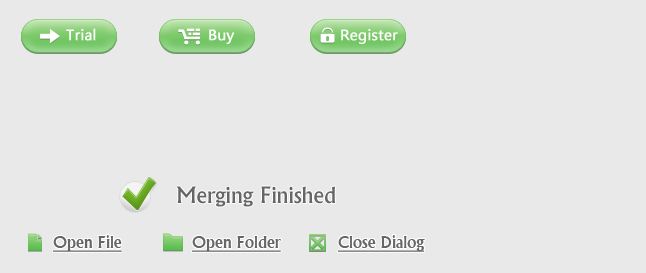
<style>
.page{position:relative;width:646px;height:273px;background:#e9e9e9}
.page>*{position:absolute;margin:0}
.t1{font:14px "MicrosoftYaHei";color:#ffffff;font-weight:bold}
.t2{font:24px "Narkisim";color:#666666}
.t3{font:18px "Narkisim";color:#666666}
.t4{font:18px "Narkisim";color:#666666;text-decoration:underline}
</style>
<div class="page">
<p class="t1" style="left:66px;top:28px;width:30px;height:13px">Trial</p>
<p class="t1" style="left:66px;top:28px;width:30px;height:13px">Trial</p>
<p class="t1" style="left:209px;top:29px;width:26px;height:15px">Buy</p>
<p class="t1" style="left:209px;top:29px;width:26px;height:15px">Buy</p>
<p class="t1" style="left:341px;top:29px;width:57px;height:15px">Register</p>
<p class="t1" style="left:341px;top:29px;width:57px;height:15px">Register</p>
<p class="t2" style="left:176px;top:186px;width:160px;height:21px">Merging Finished</p>
<p class="t3" style="left:53px;top:235px;width:69px;height:16px">Open File</p>
<p class="t4" style="left:53px;top:235px;width:69px;height:17px">Open File</p>
<p class="t3" style="left:192px;top:236px;width:89px;height:15px">Open Folder</p>
<p class="t4" style="left:192px;top:236px;width:89px;height:16px">Open Folder</p>
<p class="t3" style="left:338px;top:235px;width:87px;height:16px">Close Dialog</p>
<p class="t4" style="left:338px;top:235px;width:87px;height:17px">Close Dialog</p>
</div>
